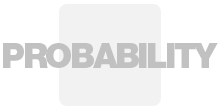
<style>
.page{position:relative;width:220px;height:110px;background:#ffffff}
.page>*{position:absolute;margin:0}
.t1{font:34px "HelveticaNeueLTStd-Blk";letter-spacing:-0.075em;color:#c1c1c1;text-transform:uppercase}
</style>
<div class="page">
<p class="t1" style="left:3px;top:43px;width:215px;height:25px">Probability</p>
</div>
